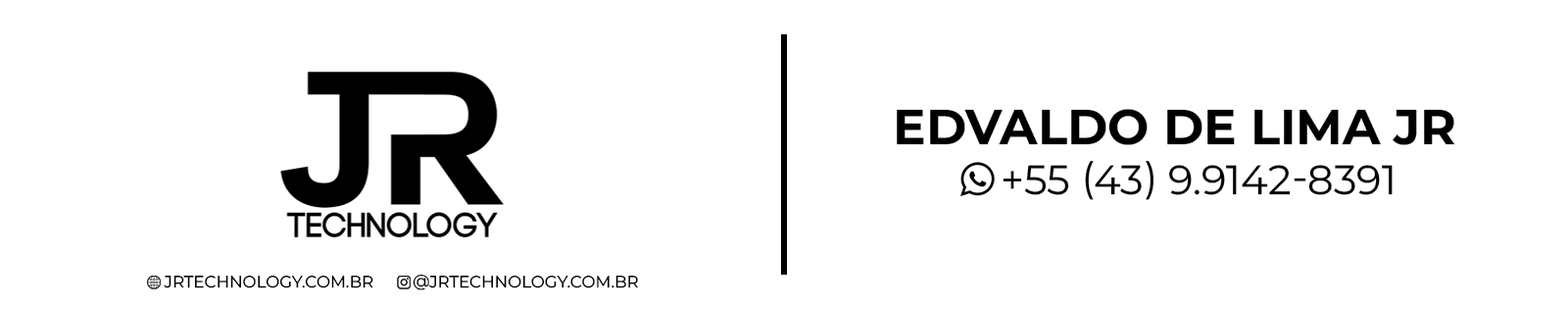
<style>
.page{position:relative;width:1568px;height:309px;background:#ffffff}
.page>*{position:absolute;margin:0}
.t1{font:49px "MontserratRoman-Bold";color:#000000;text-transform:uppercase}
.t2{font:40.8px "MontserratRoman-Regular";color:#000000;text-transform:uppercase}
.t3{font:16.3px "MontserratRoman-Regular";color:#000000;text-transform:uppercase}
</style>
<div class="page">
<p class="t1" style="left:897px;top:109px;width:558px;height:36px">Edvaldo de Lima Jr</p>
<p class="t2" style="left:1003px;top:161px;width:390px;height:39px">+55 (43) 9.9142-8391</p>
<p class="t3" style="left:164px;top:275px;width:209px;height:13px">jrtechnology.com.br</p>
<p class="t3" style="left:413px;top:274px;width:225px;height:16px">@jrtechnology.com.br</p>
</div>
